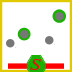
<style>
.page{position:relative;width:72px;height:72px;background:#ffffff}
.page>*{position:absolute;margin:0}
.t1{font:19.6px "Vijaya";letter-spacing:0.14em;color:#f70707;scale:1.29 1}
</style>
<div class="page">
<p class="t1" style="left:30px;top:59px;width:11px;height:11px">S</p>
</div>
